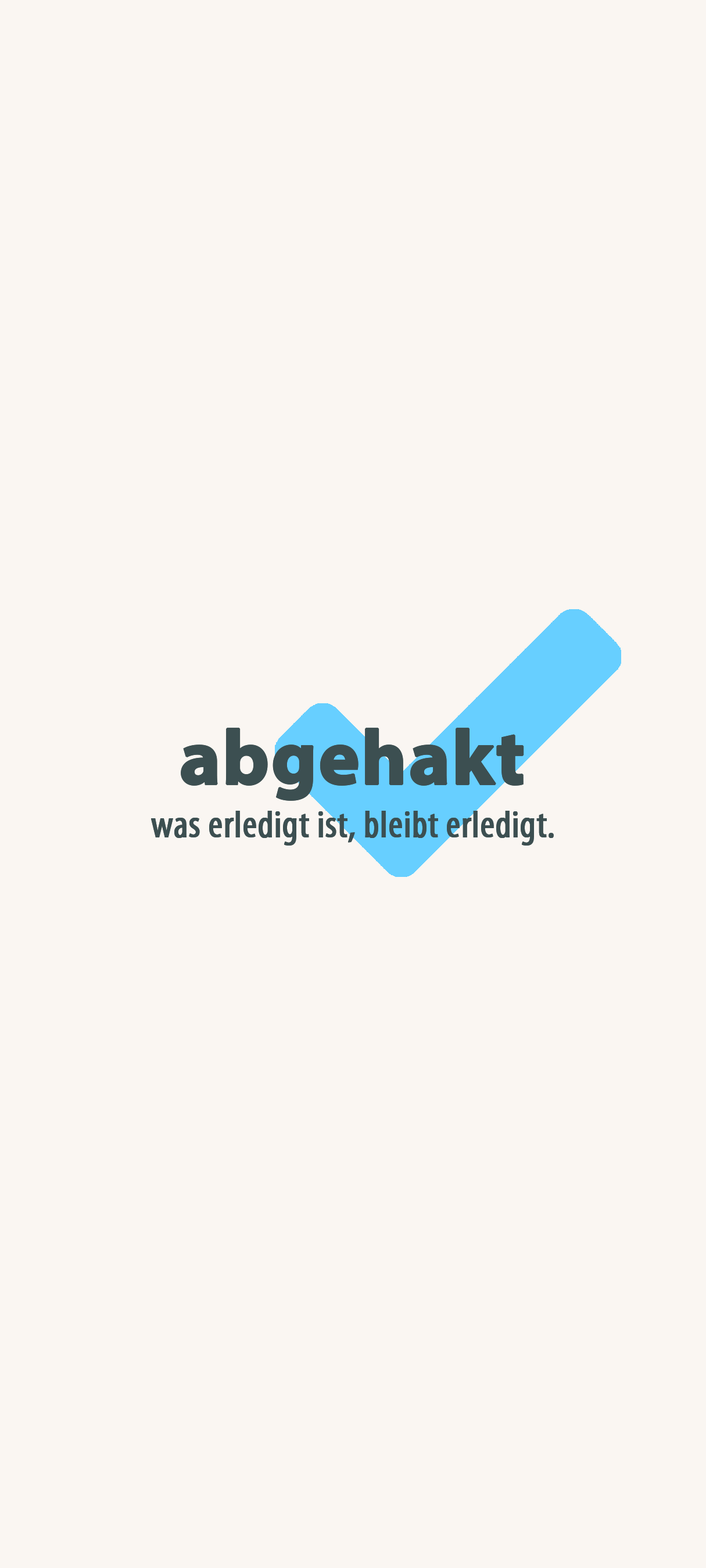
<style>
.page{position:relative;width:706px;height:1568px;background:#faf6f2}
.page>*{position:absolute;margin:0}
.t1{font:77.4px "MyriadPro-Bold";color:#3c4f51;font-weight:bold}
.t2{font:38.7px "MyriadPro-Cond";color:#3c4f51;font-weight:bold}
</style>
<div class="page">
<p class="t1" style="left:181px;top:728px;width:343px;height:73px">abgehakt</p>
<p class="t2" style="left:151px;top:811px;width:402px;height:35px">was erledigt ist, bleibt erledigt.</p>
</div>
